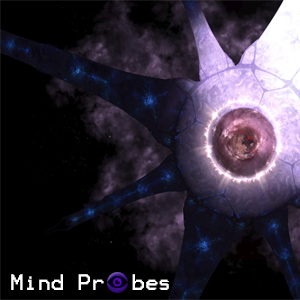
<style>
.page{position:relative;width:300px;height:300px;background:#000000}
.page>*{position:absolute;margin:0}
.t1{font:18px "Terminal";color:#ffffff}
</style>
<div class="page">
<p class="t1" style="left:11px;top:274px;width:158px;height:16px">Mind Pr  bes</p>
</div>
